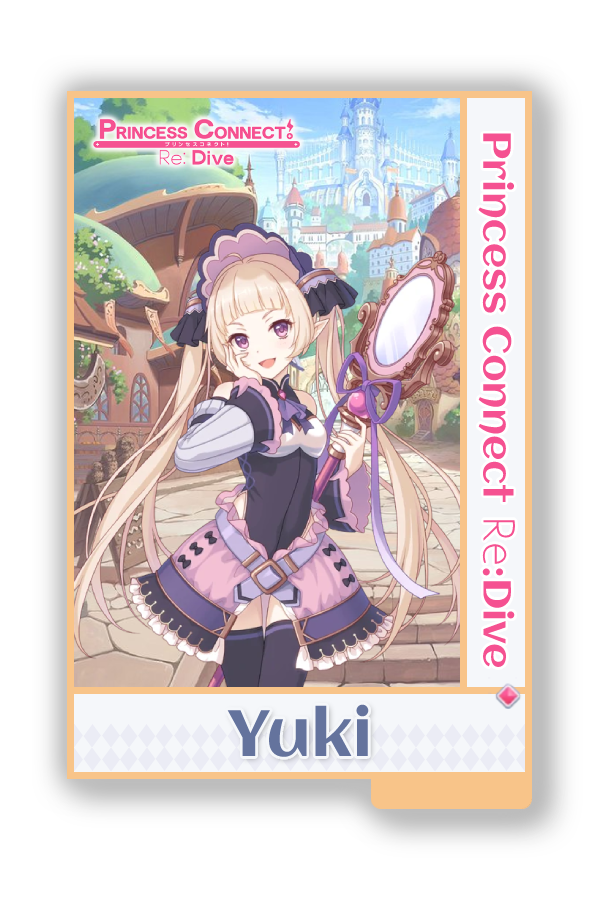
<style>
.page{position:relative;width:600px;height:900px;background:#ffffff}
.page>*{position:absolute;margin:0}
.t1{font:39px "Aclonica-Regular";color:#f55191}
.t2{font:39px "AaarghNormal";color:#f55191}
.t3{font:65px "Aclonica-Regular";color:#64739d}
</style>
<div class="page">
<p class="t1" style="left:478px;top:133px;width:38px;height:534px;rotate:90deg">Princess Connect <span class="t2">Re</span>:Dive</p>
<p class="t3" style="left:227px;top:704px;width:142px;height:53px">Yuki</p>
</div>
